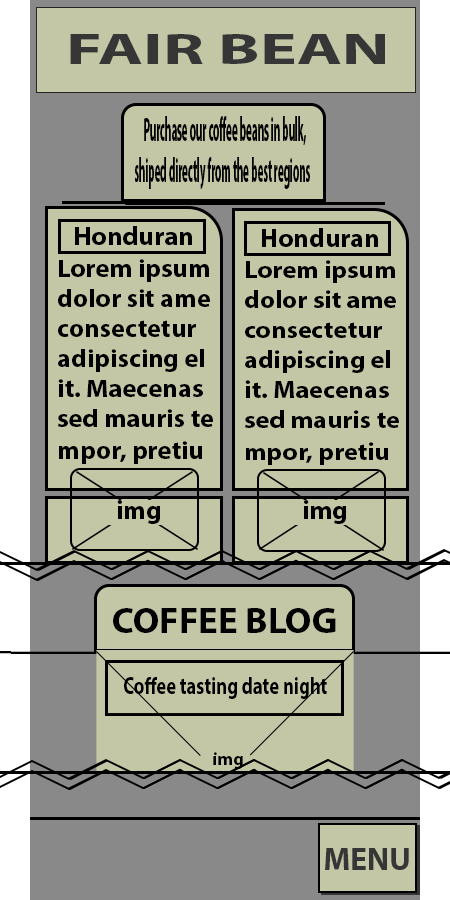
<style>
.page{position:relative;width:450px;height:900px;background:#c4c7a6}
.page>*{position:absolute;margin:0}
.t1{font:43.5px "MyriadPro-Bold";color:#363636;scale:1.59 1}
.t2{font:34px "MyriadPro-Bold";color:#000000;scale:0.32 1}
.t3{font:26.7px "MyriadPro-Bold";color:#000000}
.t4{font:26.5px "MyriadPro-Bold";color:#000000}
.t5{font:25.1px "MyriadPro-Bold";color:#000000;scale:1.06 1}
.t6{font:25px "MyriadPro-Bold";color:#000000;scale:1.06 1}
.t7{font:36.9px "MyriadPro-Bold";color:#000000}
.t8{font:24px "MyriadPro-Bold";color:#000000;scale:0.77 1}
.t9{font:18.3px "MyriadPro-Bold";color:#000000}
.t10{font:32px "MyriadPro-Bold";color:#363636}
</style>
<div class="page">
<p class="t1" style="left:70px;top:34px;width:315px;height:30px">FAIR BEAN</p>
<p class="t2" style="left:135px;top:116px;width:175px;height:74px">Purchase our coffee beans in bulk, shiped directly from the best regions</p>
<p class="t3" style="left:75px;top:226px;width:117px;height:19px">Honduran</p>
<p class="t4" style="left:262px;top:228px;width:116px;height:19px">Honduran</p>
<p class="t5" style="left:58px;top:259px;width:155px;height:205px">Lorem ipsum <br>dolor sit ame<br>consectetur <br>adipiscing el<br>it. Maecenas <br>sed mauris te<br>mpor, pretiu</p>
<p class="t6" style="left:245px;top:260px;width:154px;height:205px">Lorem ipsum <br>dolor sit ame<br>consectetur <br>adipiscing el<br>it. Maecenas <br>sed mauris te<br>mpor, pretiu</p>
<p class="t3" style="left:117px;top:500px;width:43px;height:24px">img</p>
<p class="t4" style="left:304px;top:500px;width:42px;height:24px">img</p>
<p class="t7" style="left:113px;top:608px;width:223px;height:25px">COFFEE BLOG</p>
<p class="t8" style="left:124px;top:677px;width:203px;height:22px">Coffee tasting date night</p>
<p class="t9" style="left:213px;top:752px;width:30px;height:17px">img</p>
<p class="t10" style="left:325px;top:848px;width:84px;height:22px">MENU</p>
</div>
